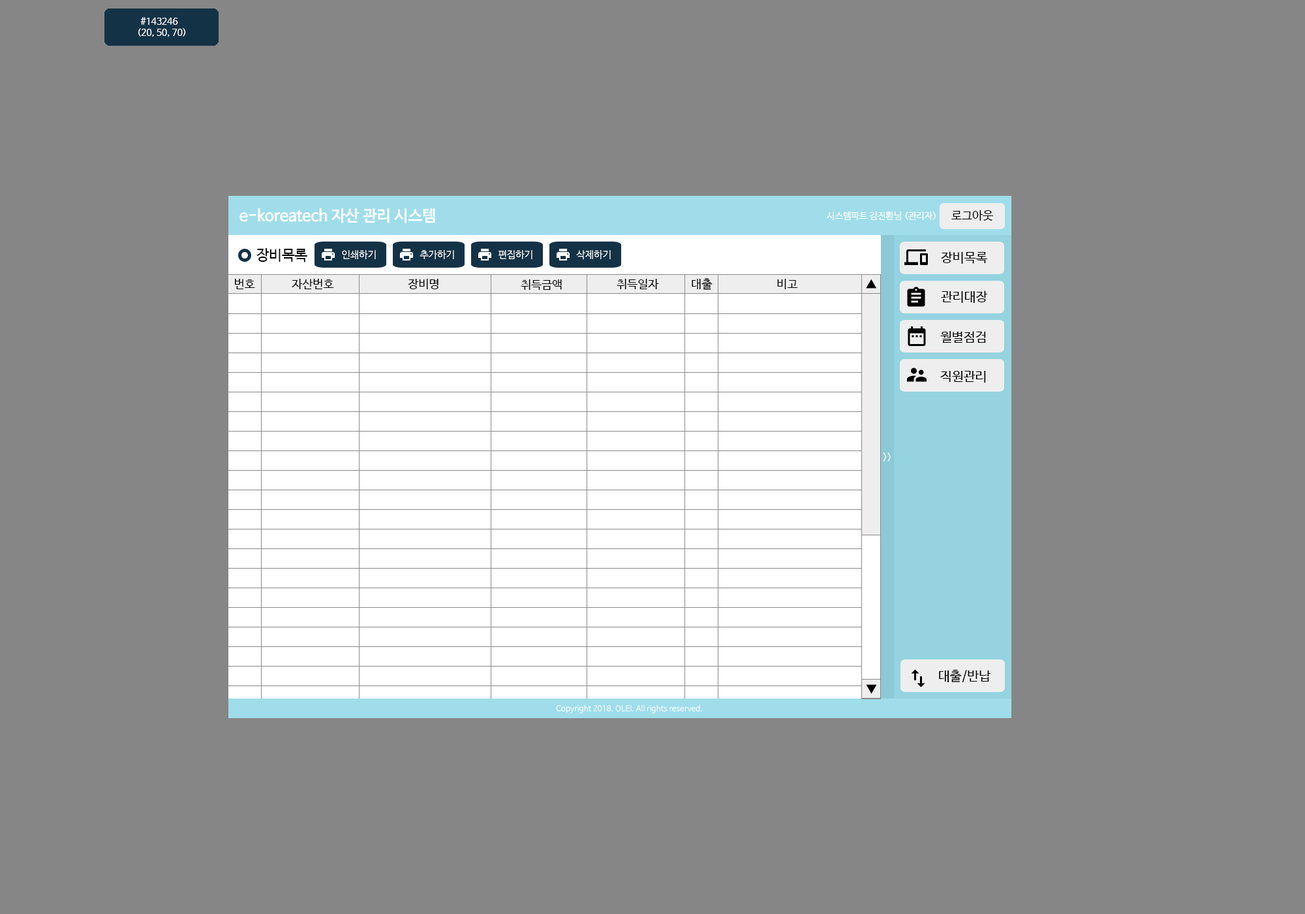
<style>
.page{position:relative;width:1305px;height:914px;background:#868686}
.page>*{position:absolute;margin:0}
.t1{font:9.1px "NanumBarunGothic";color:#ffffff}
.t2{font:15.7px "NanumBarunGothicBold";color:#ffffff}
.t3{font:11.7px "NanumBarunGothic";color:#000000}
.t4{font:14.4px "NanumBarunGothic";color:#000000}
.t5{font:9.8px "NanumBarunGothic";color:#ffffff}
.t6{font:13.1px "NanumBarunGothic";color:#000000}
.t7{font:7.8px "NanumBarunGothic";color:#ffffff}
</style>
<div class="page">
<p class="t1" style="left:138px;top:17px;width:48px;height:20px">#143246<br>(20, 50, 70)</p>
<p class="t2" style="left:239px;top:208px;width:196px;height:15px">e-koreatech 자산 관리 시스템</p>
<p class="t1" style="left:826px;top:211px;width:110px;height:9px">시스템파트 김진환님 (관리자)</p>
<p class="t3" style="left:951px;top:210px;width:42px;height:11px">로그아웃</p>
<p class="t4" style="left:256px;top:248px;width:51px;height:14px">장비목록</p>
<p class="t5" style="left:342px;top:250px;width:34px;height:9px">인쇄하기</p>
<p class="t5" style="left:420px;top:250px;width:34px;height:9px">추가하기</p>
<p class="t5" style="left:499px;top:250px;width:34px;height:9px">편집하기</p>
<p class="t5" style="left:576px;top:250px;width:35px;height:10px">삭제하기</p>
<p class="t6" style="left:941px;top:251px;width:47px;height:13px">장비목록</p>
<p class="t3" style="left:234px;top:279px;width:21px;height:10px">번호</p>
<p class="t3" style="left:292px;top:279px;width:42px;height:10px">자산번호</p>
<p class="t3" style="left:408px;top:279px;width:31px;height:10px">장비명</p>
<p class="t3" style="left:521px;top:279px;width:41px;height:11px">취득금액</p>
<p class="t3" style="left:617px;top:279px;width:42px;height:10px">취득일자</p>
<p class="t3" style="left:692px;top:278px;width:21px;height:12px">대출</p>
<p class="t3" style="left:777px;top:279px;width:21px;height:10px">비고</p>
<p class="t3" style="left:866px;top:279px;width:11px;height:9px">▲</p>
<p class="t6" style="left:941px;top:290px;width:47px;height:13px">관리대장</p>
<p class="t6" style="left:940px;top:331px;width:46px;height:12px">월별점검</p>
<p class="t6" style="left:940px;top:371px;width:46px;height:11px">직원관리</p>
<p class="t5" style="left:883px;top:452px;width:8px;height:9px">&gt;&gt;</p>
<p class="t6" style="left:939px;top:669px;width:52px;height:14px">대출/반납</p>
<p class="t3" style="left:866px;top:684px;width:11px;height:10px">▼</p>
<p class="t7" style="left:556px;top:704px;width:146px;height:9px">Copyright 2018. OLEI. All rights reserved.</p>
</div>
